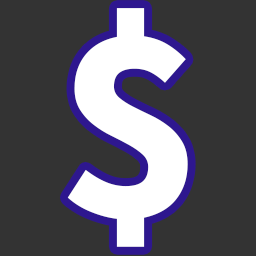
<style>
.page{position:relative;width:256px;height:256px;background:#333333}
.page>*{position:absolute;margin:0}
.t1{font:279.2px "SourceSansPro-Bold";color:#ffffff}
</style>
<div class="page">
<p class="t1" style="left:67px;top:8px;width:121px;height:239px">$</p>
</div>
